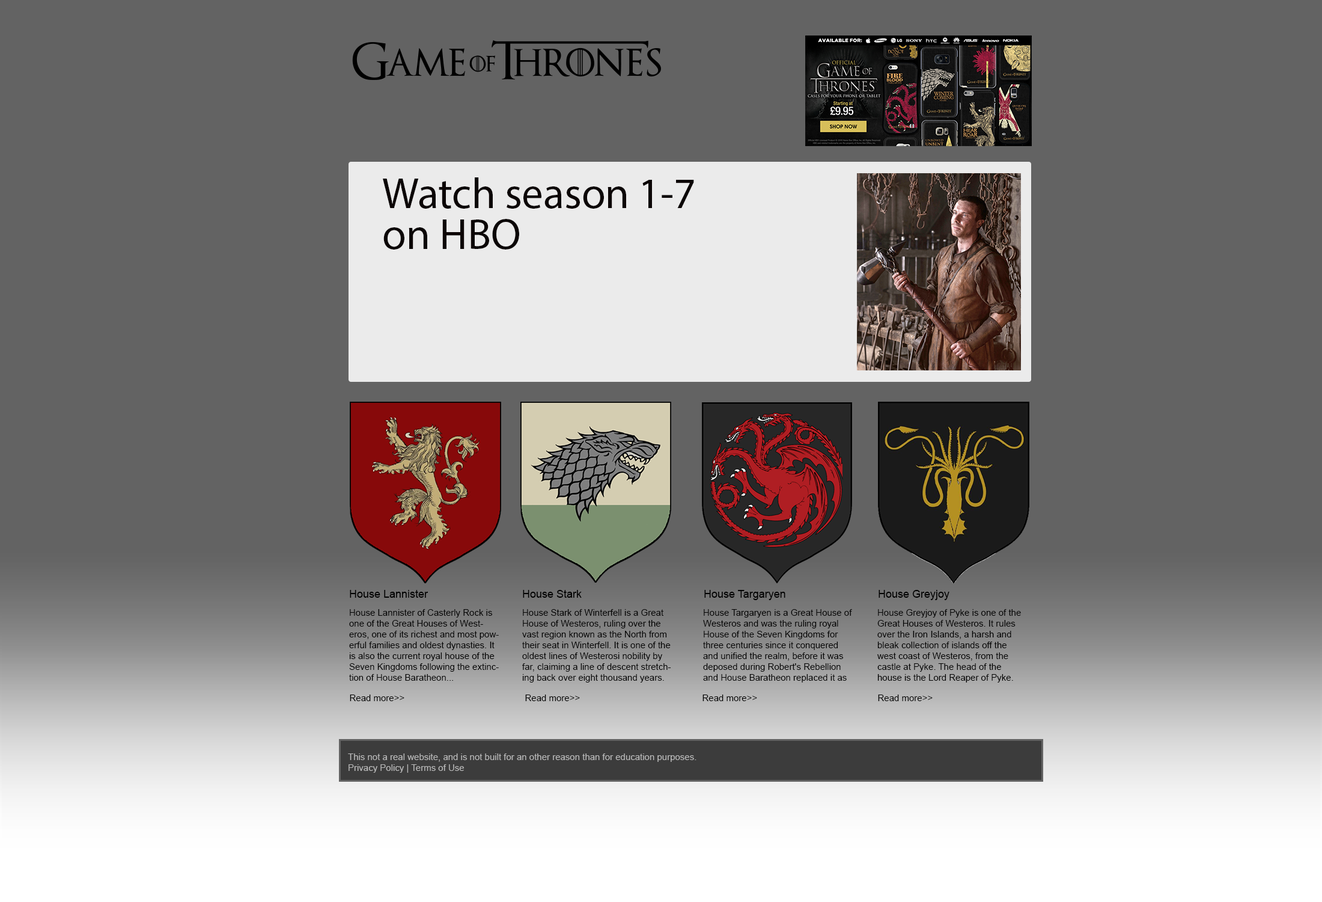
<style>
.page{position:relative;width:1322px;height:902px;background:#636363}
.page>*{position:absolute;margin:0}
.t1{font:43.3px/40.9px "MyriadPro-Regular";color:#0c0606}
.t2{font:10.8px "ArialMT";color:#000000}
.t3{font:9px "ArialMT";color:#000000}
.t4{font:9px "ArialMT";color:#bababa}
</style>
<div class="page">
<p class="t1" style="left:383px;top:177px;width:311px;height:72px">Watch season 1-7 <br>on HBO</p>
<p class="t2" style="left:350px;top:590px;width:79px;height:8px">House Lannister</p>
<p class="t2" style="left:523px;top:590px;width:59px;height:8px">House Stark</p>
<p class="t2" style="left:705px;top:590px;width:81px;height:10px">House Targaryen</p>
<p class="t2" style="left:879px;top:590px;width:71px;height:10px">House Greyjoy</p>
<p class="t3" style="left:349px;top:609px;width:150px;height:71px">House Lannister of Casterly Rock is one of the Great Houses of Westeros, one of its richest and most powerful families and oldest dynasties. It is also the current royal house of the Seven Kingdoms following the extinction of House Baratheon...</p>
<p class="t3" style="left:522px;top:609px;width:149px;height:73px">House Stark of Winterfell is a Great House of Westeros, ruling over the vast region known as the North from their seat in Winterfell. It is one of the oldest lines of Westerosi nobility by far, claiming a line of descent stretching back over eight thousand years.</p>
<p class="t3" style="left:703px;top:609px;width:149px;height:73px">House Targaryen is a Great House of Westeros and was the ruling royal House of the Seven Kingdoms for three centuries since it conquered and unified the realm, before it was deposed during Robert's Rebellion and House Baratheon replaced it as</p>
<p class="t3" style="left:878px;top:609px;width:143px;height:73px">House Greyjoy of Pyke is one of the Great Houses of Westeros. It rules over the Iron Islands, a harsh and bleak collection of islands off the west coast of Westeros, from the castle at Pyke. The head of the house is the Lord Reaper of Pyke.</p>
<p class="t3" style="left:350px;top:694px;width:55px;height:7px">Read more&gt;&gt;</p>
<p class="t3" style="left:525px;top:694px;width:55px;height:7px">Read more&gt;&gt;</p>
<p class="t3" style="left:703px;top:694px;width:54px;height:7px">Read more&gt;&gt;</p>
<p class="t3" style="left:878px;top:694px;width:55px;height:7px">Read more&gt;&gt;</p>
<p class="t4" style="left:348px;top:753px;width:349px;height:19px">This not a real website, and is not built for an other reason than for education purposes. <br>Privacy Policy | Terms of Use</p>
</div>
